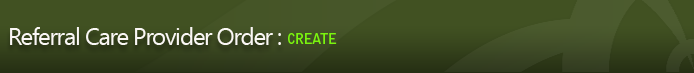
<style>
.page{position:relative;width:694px;height:73px;background:#415122}
.page>*{position:absolute;margin:0}
.t1{font:24px "SegoeUI";letter-spacing:-0.05em;color:#faf7f5}
.t2{font:14px "BellGothicStd-Bold";letter-spacing:-0.05em;color:#7af40e}
</style>
<div class="page">
<p class="t1" style="left:10px;top:27px;width:271px;height:18px">Referral Care Provider Order :</p>
<p class="t2" style="left:288px;top:33px;width:49px;height:11px">CREATE</p>
</div>
